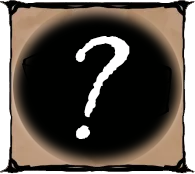
<style>
.page{position:relative;width:195px;height:174px;background:#000100}
.page>*{position:absolute;margin:0}
.t1{font:150px "BlackadderITC-Regular";color:#ffffff}
</style>
<div class="page">
<p class="t1" style="left:75px;top:36px;width:55px;height:103px">?</p>
</div>
